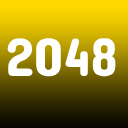
<style>
.page{position:relative;width:128px;height:128px}
.page>*{position:absolute;margin:0}
.t1{font:55px "ConcertOne-Regular";color:#ffffff}
</style>
<div class="page">
<p class="t1" style="left:7px;top:38px;width:109px;height:39px">2048</p>
</div>
